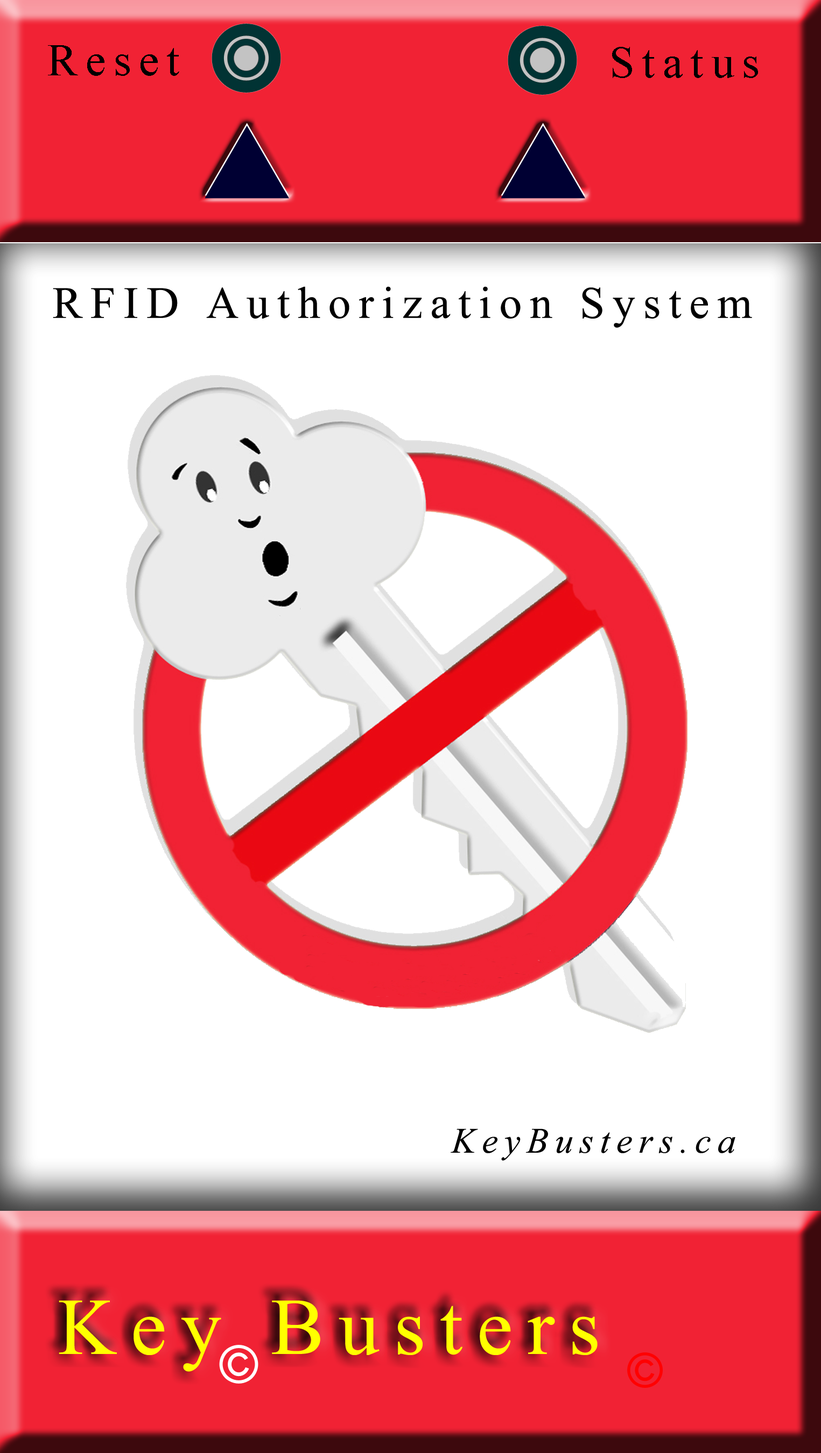
<style>
.page{position:relative;width:821px;height:1453px;background:#ffffff}
.page>*{position:absolute;margin:0}
.t1{font:44.8px "TimesNewRomanPSMT";letter-spacing:0.18em;color:#000000}
.t2{font:35.9px "TimesNewRomanPS-ItalicMT";letter-spacing:0.18em;color:#000000}
.t3{font:80.7px "TimesNewRomanPSMT";letter-spacing:0.18em;color:#ffff00}
</style>
<div class="page">
<p class="t1" style="left:48px;top:45px;width:131px;height:31px">Reset</p>
<p class="t1" style="left:612px;top:47px;width:146px;height:31px">Status</p>
<p class="t1" style="left:53px;top:286px;width:699px;height:42px">RFID Authorization System</p>
<p class="t2" style="left:450px;top:1128px;width:285px;height:33px">KeyBusters.ca</p>
<p class="t3" style="left:59px;top:1300px;width:538px;height:72px">Key Busters</p>
</div>
